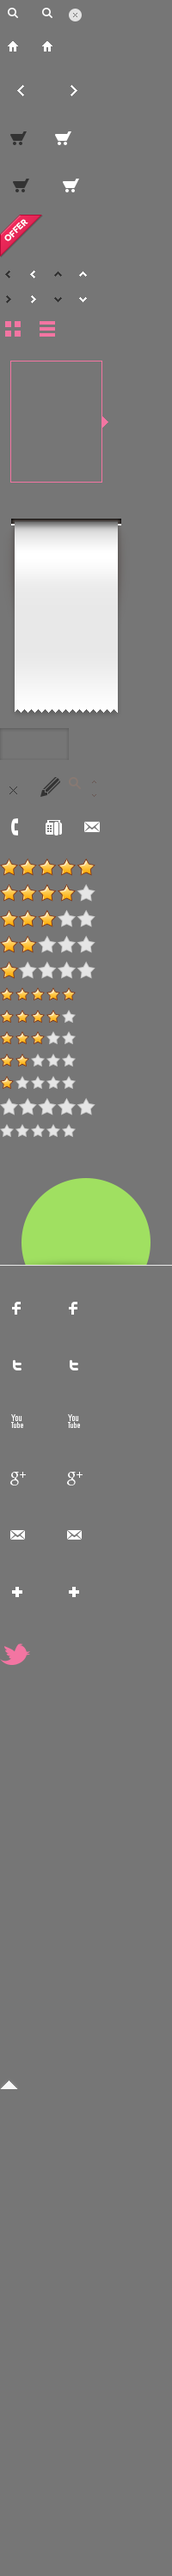
<style>
.page{position:relative;width:172px;height:2576px;background:#767676}
.page>*{position:absolute;margin:0}
.t1{font:8.6px "Novecentowide-DemiBold";color:#ffffff}
</style>
<div class="page">
<p class="t1" style="left:4px;top:219px;width:24px;height:22px;rotate:-45deg">offer</p>
</div>
